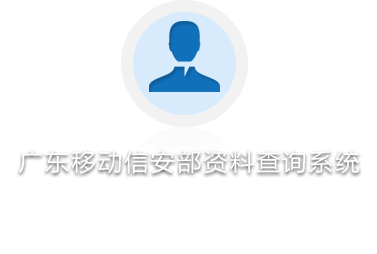
<style>
.page{position:relative;width:377px;height:254px;background:#ffffff}
.page>*{position:absolute;margin:0}
.t1{font:24px "MicrosoftYaHei";letter-spacing:0.1em;color:#ffffff}
</style>
<div class="page">
<p class="t1" style="left:19px;top:149px;width:341px;height:25px">广东移动信安部资料查询系统</p>
</div>
